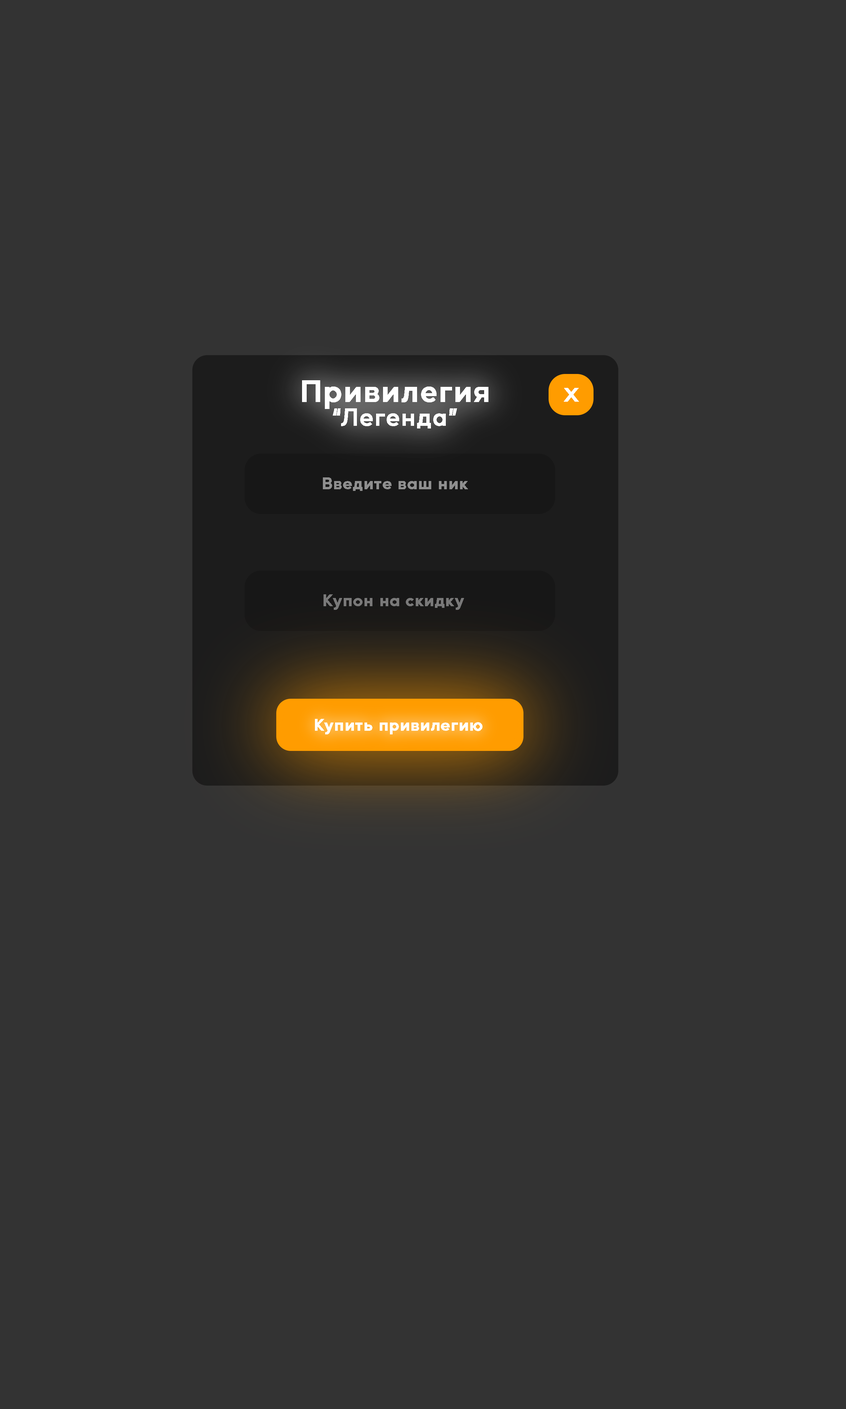
<style>
.page{position:relative;width:846px;height:1409px;background:#333333}
.page>*{position:absolute;margin:0}
.t1{font:29.7px/23.8px "MusticaPro-SemiBold";letter-spacing:0.05em;color:#ffffff;font-weight:bold}
.t2{font:23.8px/23.8px "MusticaPro-SemiBold";letter-spacing:0.05em;color:#ffffff;font-weight:bold}
.t3{font:19px "MusticaPro-SemiBold";letter-spacing:0.05em;color:#ffffff;font-weight:bold;scale:1.24 1}
.t4{font:15.9px "MusticaPro-SemiBold";letter-spacing:0.05em;color:#8f8f8f;font-weight:bold}
.t5{font:15.9px "MusticaPro-SemiBold";letter-spacing:0.05em;color:#797979;font-weight:bold}
.t6{font:15.9px "MusticaPro-SemiBold";letter-spacing:0.05em;color:#ffffff;font-weight:bold}
</style>
<div class="page">
<p class="t1" style="left:302px;top:380px;width:186px;height:49px"><span class="t2">      </span>Привилегия<br><span class="t2">          “Легенда”</span></p>
<p class="t3" style="left:564px;top:388px;width:15px;height:14px">X</p>
<p class="t4" style="left:323px;top:478px;width:145px;height:13px">Введите ваш ник</p>
<p class="t5" style="left:324px;top:595px;width:140px;height:15px">Купон на скидку</p>
<p class="t6" style="left:315px;top:719px;width:167px;height:16px">Купить привилегию</p>
</div>
